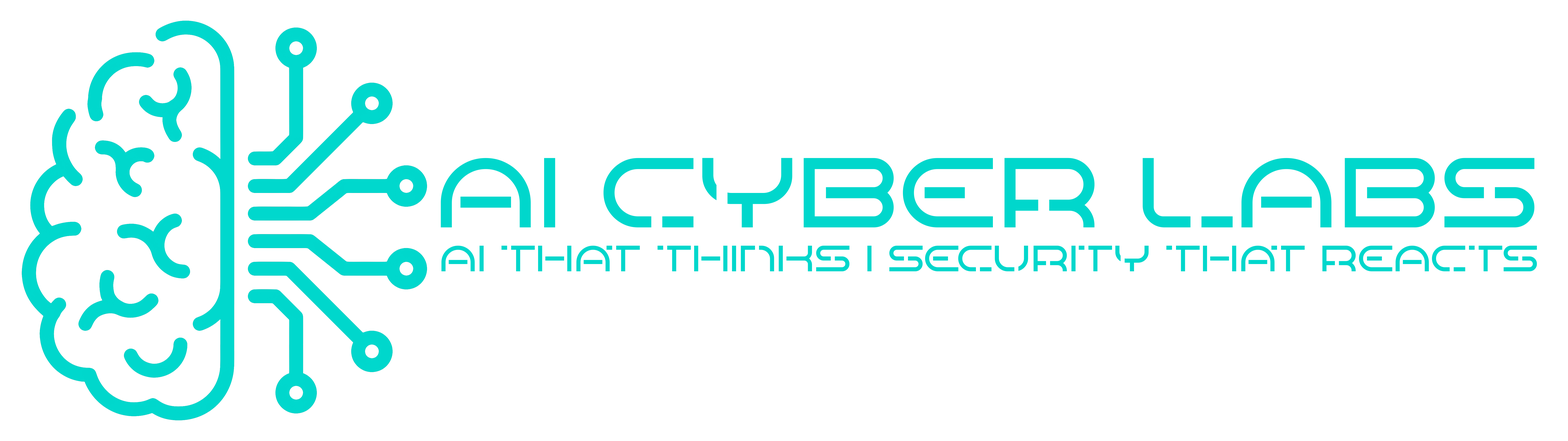
<style>
.page{position:relative;width:1568px;height:441px;background:#ffffff}
.page>*{position:absolute;margin:0}
.t1{font:36.6px "NexionPERSONALUSEONLY!";color:#00d7cc}
.t2{font:99px "NexionPERSONALUSEONLY!";color:#00d7cc}
</style>
<div class="page">
<p class="t1" style="left:441px;top:158px;width:1096px;height:113px;text-align:center"><span class="t2">AI Cyber Labs<br></span>AI THAT THINKS | SECURITY THAT REACTS</p>
</div>
